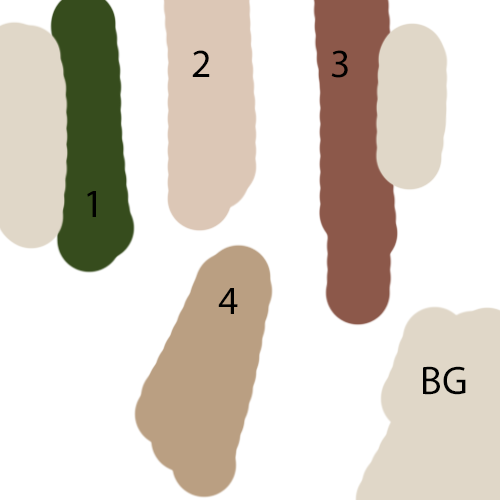
<style>
.page{position:relative;width:500px;height:500px;background:#ffffff}
.page>*{position:absolute;margin:0}
.t1{font:40px "MyriadPro-Regular";color:#000000}
</style>
<div class="page">
<p class="t1" style="left:192px;top:50px;width:18px;height:27px">2</p>
<p class="t1" style="left:331px;top:50px;width:17px;height:28px">3</p>
<p class="t1" style="left:87px;top:191px;width:9px;height:26px">1</p>
<p class="t1" style="left:218px;top:288px;width:20px;height:26px">4</p>
<p class="t1" style="left:423px;top:366px;width:43px;height:29px">BG</p>
</div>
